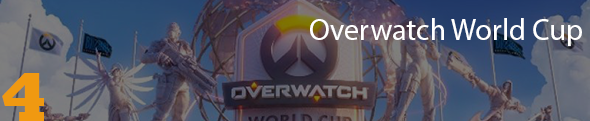
<style>
.page{position:relative;width:590px;height:121px}
.page>*{position:absolute;margin:0}
.t1{font:30px "MyriadPro-Regular";color:#ffffff}
.t2{font:70px "Rockwell-ExtraBold";color:#f09911}
</style>
<div class="page">
<p class="t1" style="left:310px;top:18px;width:272px;height:28px">Overwatch World Cup</p>
<p class="t2" style="left:2px;top:73px;width:42px;height:49px">4</p>
</div>
